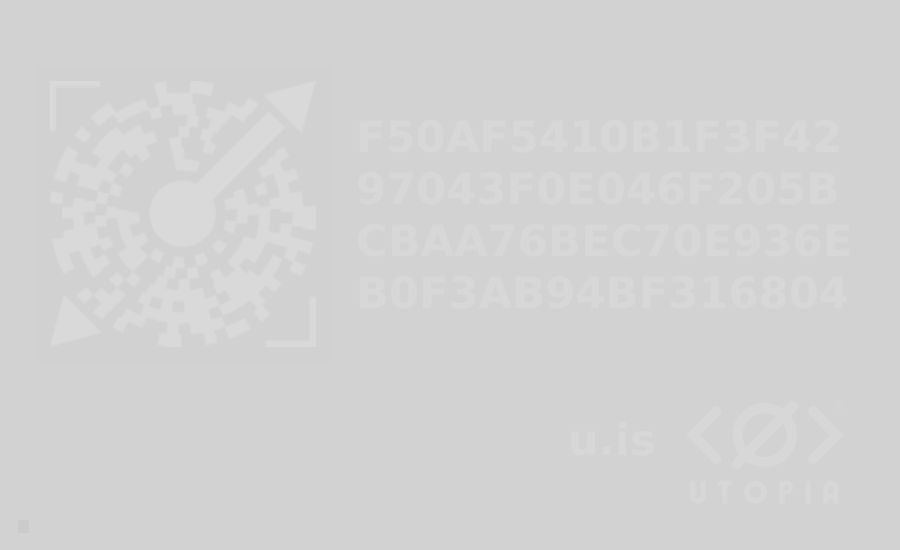
<style>
.page{position:relative;width:900px;height:550px;background:#d2d2d2}
.page>*{position:absolute;margin:0}
.t1{font:43.3px "DejaVuSans-Bold";color:#d7d7d7}
</style>
<div class="page">
<p class="t1" style="left:358px;top:119px;width:492px;height:190px">F50AF5410B1F3F42<br>97043F0E046F205B<br>CBAA76BEC70E936E<br>B0F3AB94BF316804</p>
<p class="t1" style="left:571px;top:422px;width:83px;height:34px">u.is</p>
</div>
